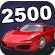
<style>
.page{position:relative;width:55px;height:55px}
.page>*{position:absolute;margin:0}
.t1{font:18.7px "Arial-Black";letter-spacing:0.02em;color:#ffffff}
</style>
<div class="page">
<p class="t1" style="left:1px;top:5px;width:51px;height:18px;rotate:-5deg">2500</p>
</div>
